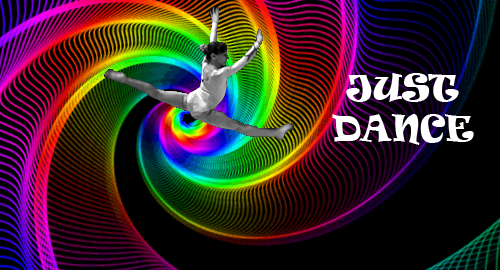
<style>
.page{position:relative;width:500px;height:270px;background:#000000}
.page>*{position:absolute;margin:0}
.t1{font:34px "Ravie";color:#ffffff}
</style>
<div class="page">
<p class="t1" style="left:332px;top:73px;width:142px;height:72px;text-align:center">JUST<br>DANCE</p>
</div>
